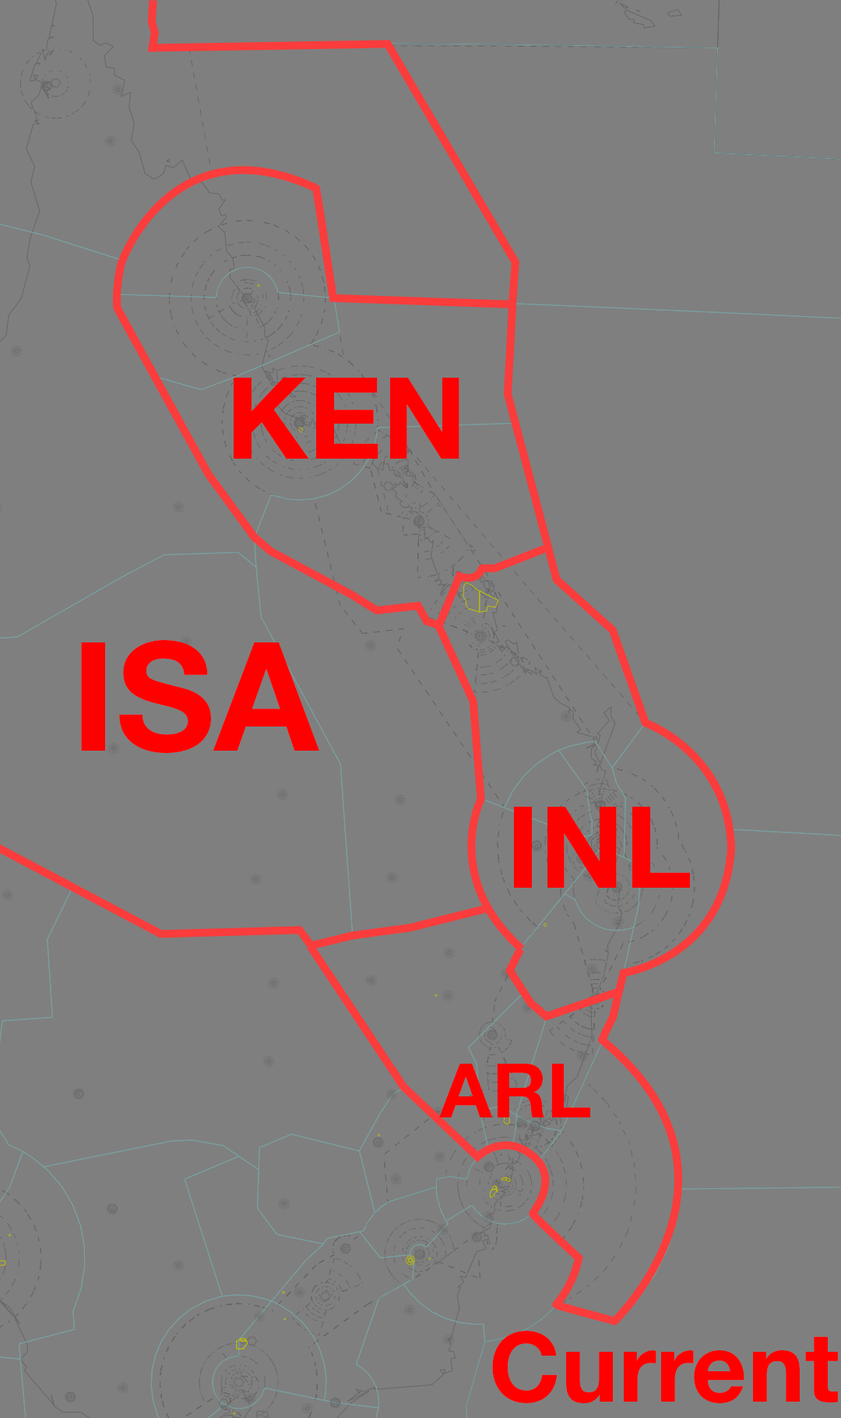
<style>
.page{position:relative;width:841px;height:1418px;background:#7f7f7f}
.page>*{position:absolute;margin:0}
.t1{font:113.7px "HelveticaNeueLTStd-Bd";color:#ff0000}
.t2{font:151.6px "HelveticaNeueLTStd-Bd";color:#ff0000}
.t3{font:75.8px "HelveticaNeueLTStd-Bd";color:#ff0000}
.t4{font:96.6px "HelveticaNeueLTStd-Bd";color:#ff0000}
</style>
<div class="page">
<p class="t1" style="left:234px;top:378px;width:225px;height:81px">KEN</p>
<p class="t2" style="left:81px;top:640px;width:238px;height:113px">ISA</p>
<p class="t1" style="left:514px;top:807px;width:176px;height:81px">INL</p>
<p class="t3" style="left:439px;top:1064px;width:151px;height:53px">ARL</p>
<p class="t4" style="left:492px;top:1331px;width:346px;height:73px">Current</p>
</div>
